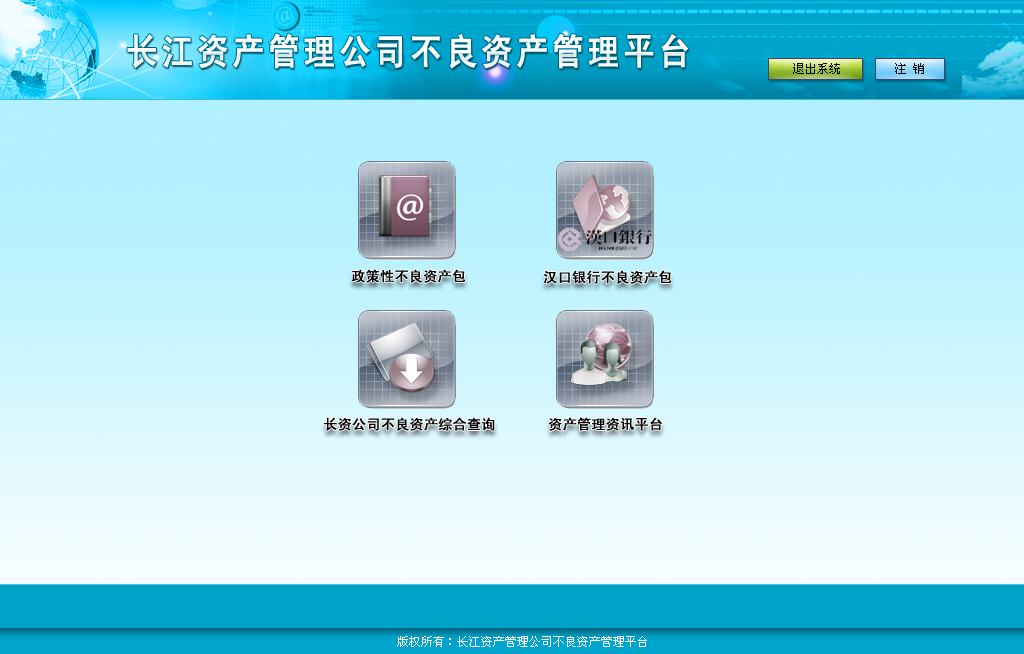
<style>
.page{position:relative;width:1024px;height:654px}
.page>*{position:absolute;margin:0}
.t1{font:12px "SimSun";color:#090909}
.t2{font:14px "SimHei";color:#000000;font-weight:bold}
</style>
<div class="page">
<p class="t1" style="left:793px;top:63px;width:47px;height:11px">退出系统</p>
<p class="t1" style="left:895px;top:63px;width:29px;height:11px">注 销</p>
<p class="t2" style="left:351px;top:269px;width:115px;height:14px">政策性不良资产包</p>
<p class="t2" style="left:544px;top:270px;width:128px;height:14px">汉口银行不良资产包</p>
<p class="t2" style="left:324px;top:417px;width:171px;height:14px">长资公司不良资产综合查询</p>
<p class="t2" style="left:548px;top:417px;width:114px;height:14px">资产管理资讯平台</p>
</div>
